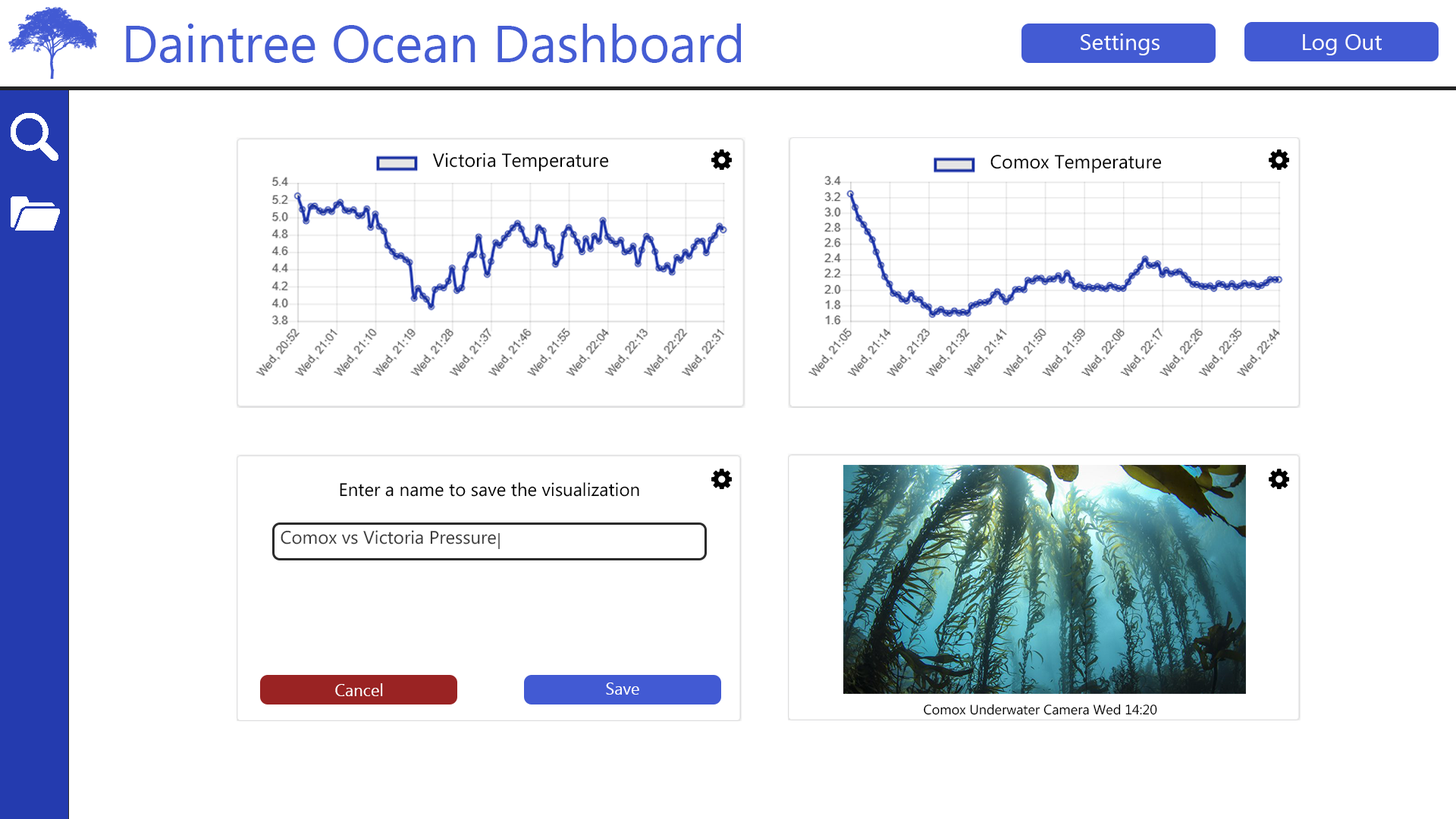
<style>
.page{position:relative;width:1456px;height:819px;background:#ffffff}
.page>*{position:absolute;margin:0}
.t1{font:52.3px "MyanmarText";color:#455dd4}
.t2{font:22.7px "MyanmarText";color:#ffffff}
.t3{font:19px "MyanmarText";color:#000000}
.t4{font:18.2px "MyanmarText";color:#000000}
.t5{font:18.2px "MyanmarText";color:#3b3b3b}
.t6{font:16.7px "MyanmarText";color:#ffffff}
.t7{font:13.6px "MyanmarText";color:#000000}
</style>
<div class="page">
<p class="t1" style="left:126px;top:24px;width:615px;height:39px">Daintree Ocean Dashboard</p>
<p class="t2" style="left:1081px;top:33px;width:78px;height:22px">Settings</p>
<p class="t2" style="left:1303px;top:34px;width:79px;height:21px">Log Out</p>
<p class="t3" style="left:432px;top:152px;width:177px;height:19px">Victoria Temperature</p>
<p class="t3" style="left:990px;top:155px;width:172px;height:18px">Comox Temperature</p>
<p class="t4" style="left:340px;top:482px;width:299px;height:15px">Enter a name to save the visualization</p>
<p class="t5" style="left:281px;top:530px;width:215px;height:14px">Comox vs Victoria Pressure</p>
<p class="t6" style="left:335px;top:683px;width:48px;height:13px">Cancel</p>
<p class="t6" style="left:606px;top:682px;width:33px;height:13px">Save</p>
<p class="t7" style="left:924px;top:704px;width:233px;height:11px">Comox Underwater Camera Wed 14:20</p>
</div>
